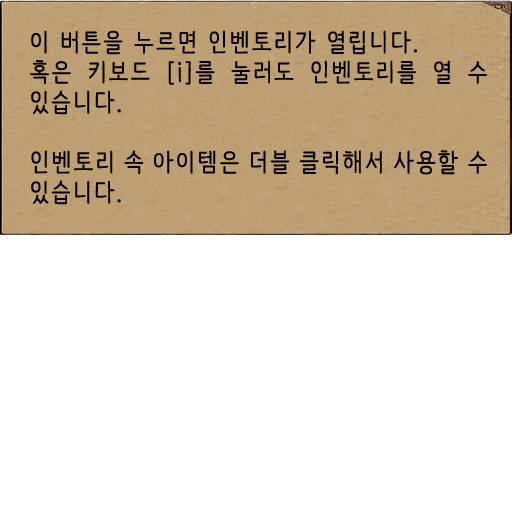
<style>
.page{position:relative;width:512px;height:512px;background:#ffffff}
.page>*{position:absolute;margin:0}
.t1{font:25px "NanumBarunpen";letter-spacing:0.075em;color:#000000;font-weight:bold}
</style>
<div class="page">
<p class="t1" style="left:30px;top:30px;width:457px;height:175px;text-align:justify">이 버튼을 누르면 인벤토리가 열립니다.<br>혹은 키보드 [i]를 눌러도 인벤토리를 열 수 있습니다.<br><br>인벤토리 속 아이템은 더블 클릭해서 사용할 수 있습니다.</p>
</div>
